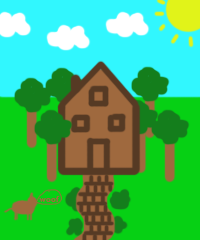
<style>
.page{position:relative;width:200px;height:240px;background:#06d014}
.page>*{position:absolute;margin:0}
.t1{font:8.3px "GillSansMT-Bold";color:#9f693e}
.t2{font:1.4px "GillSansMT-Bold";color:#9f693e}
</style>
<div class="page">
<p class="t1" style="left:39px;top:191px;width:21px;height:11px;text-align:center"><span class="t2">o</span><br>woof</p>
</div>
